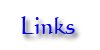
<style>
.page{position:relative;width:100px;height:50px;background:#ffffff}
.page>*{position:absolute;margin:0}
.t1{font:24px "Calligraphic421BT-RomanB";color:#0000ff}
</style>
<div class="page">
<p class="t1" style="left:21px;top:16px;width:54px;height:18px">Links</p>
</div>
